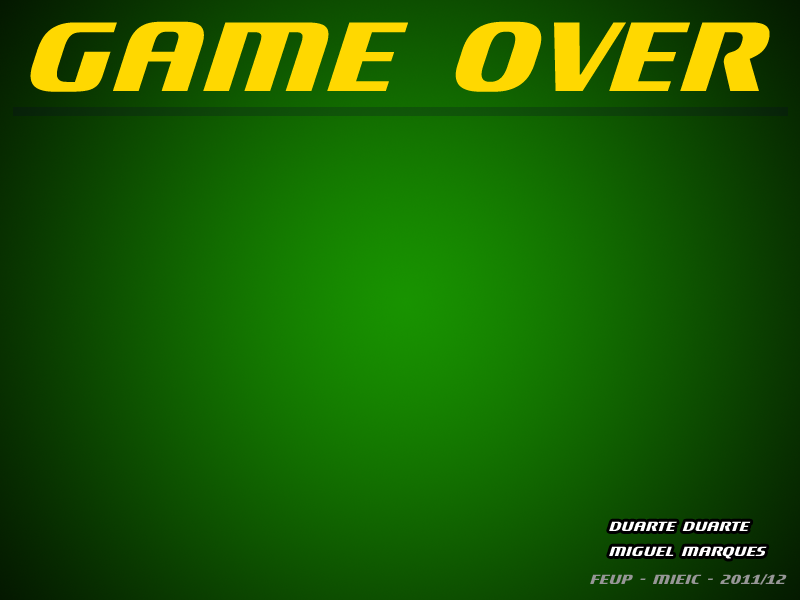
<style>
.page{position:relative;width:800px;height:600px}
.page>*{position:absolute;margin:0}
.t1{font:154.8px "Motorwerk";color:#ffd800}
.t2{font:21px "Motorwerk";color:#ffffff}
.t3{font:21px "Motorwerk";color:#969696}
</style>
<div class="page">
<p class="t1" style="left:30px;top:21px;width:740px;height:71px">Game Over</p>
<p class="t2" style="left:609px;top:521px;width:158px;height:38px">Duarte Duarte<br>Miguel Marques</p>
<p class="t3" style="left:590px;top:574px;width:197px;height:11px">FEUP - MIEIC - 2011/12</p>
</div>
